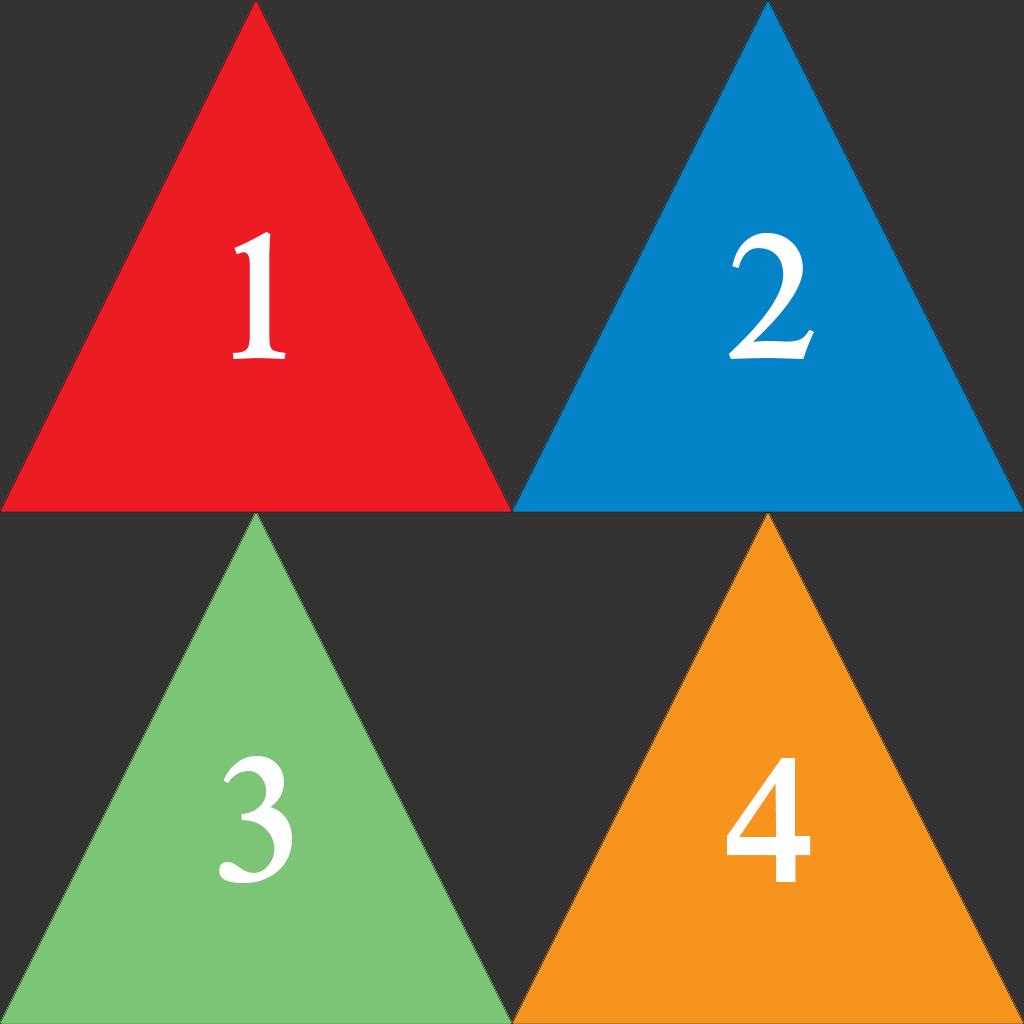
<style>
.page{position:relative;width:1024px;height:1024px;background:#333333}
.page>*{position:absolute;margin:0}
.t1{font:250px "Rod";color:#ffffff}
</style>
<div class="page">
<p class="t1" style="left:232px;top:232px;width:54px;height:127px">1</p>
<p class="t1" style="left:728px;top:233px;width:86px;height:126px">2</p>
<p class="t1" style="left:219px;top:756px;width:73px;height:127px">3</p>
<p class="t1" style="left:727px;top:758px;width:84px;height:124px">4</p>
</div>
